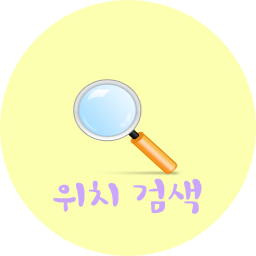
<style>
.page{position:relative;width:256px;height:256px;background:#fcffb0}
.page>*{position:absolute;margin:0}
.t1{font:36px "HoonWhayangR";color:#caa6fe;scale:1.1 1}
</style>
<div class="page">
<p class="t1" style="left:53px;top:178px;width:149px;height:36px">위치 검색</p>
</div>
